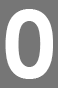
<style>
.page{position:relative;width:58px;height:88px;background:#767676}
.page>*{position:absolute;margin:0}
.t1{font:94px "CenturyGothic-Bold";color:#ffffff}
</style>
<div class="page">
<p class="t1" style="left:5px;top:9px;width:48px;height:70px">0</p>
</div>
